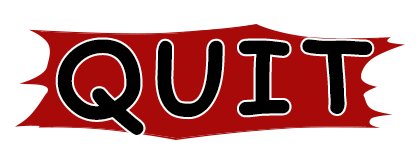
<style>
.page{position:relative;width:420px;height:160px;background:#ffffff}
.page>*{position:absolute;margin:0}
.t1{font:100px "ComicSansMS-Bold";letter-spacing:0.1em;color:#000000}
</style>
<div class="page">
<p class="t1" style="left:57px;top:39px;width:316px;height:96px">QUIT</p>
</div>
